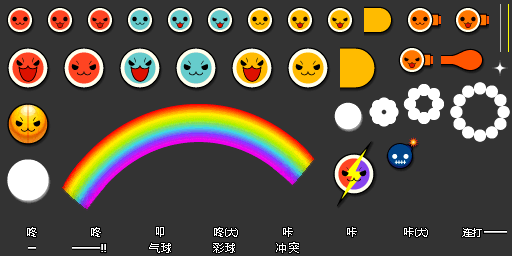
<style>
.page{position:relative;width:512px;height:256px;background:#333333}
.page>*{position:absolute;margin:0}
.t1{font:11px "MicrosoftYaHei";color:#ffffff}
.t2{font:11px "MicrosoftYaHei";color:#ffffff;scale:0.86 1}
.t3{font:10px "MicrosoftYaHei";letter-spacing:-0.06em;color:#ffffff}
.t4{font:11px "MicrosoftYaHei";letter-spacing:-0.06em;color:#ffffff}
.t5{font:10px "MicrosoftYaHei";color:#ffffff}
.t6{font:11px "MicrosoftYaHei";letter-spacing:0.08em;color:#ffffff}
</style>
<div class="page">
<p class="t1" style="left:27px;top:227px;width:10px;height:10px">咚</p>
<p class="t1" style="left:91px;top:227px;width:10px;height:10px">咚</p>
<p class="t2" style="left:156px;top:227px;width:8px;height:10px">叩</p>
<p class="t3" style="left:214px;top:227px;width:24px;height:10px"><span class="t4">咚</span>(大)</p>
<p class="t1" style="left:283px;top:227px;width:10px;height:10px">咔</p>
<p class="t1" style="left:347px;top:227px;width:10px;height:10px">咔</p>
<p class="t3" style="left:404px;top:227px;width:24px;height:10px"><span class="t4">咔</span>(大)</p>
<p class="t5" style="left:462px;top:228px;width:20px;height:9px">连打</p>
<p class="t6" style="left:149px;top:243px;width:22px;height:10px">气球</p>
<p class="t6" style="left:213px;top:243px;width:22px;height:10px">彩球</p>
<p class="t6" style="left:276px;top:242px;width:23px;height:11px">冲突</p>
</div>
